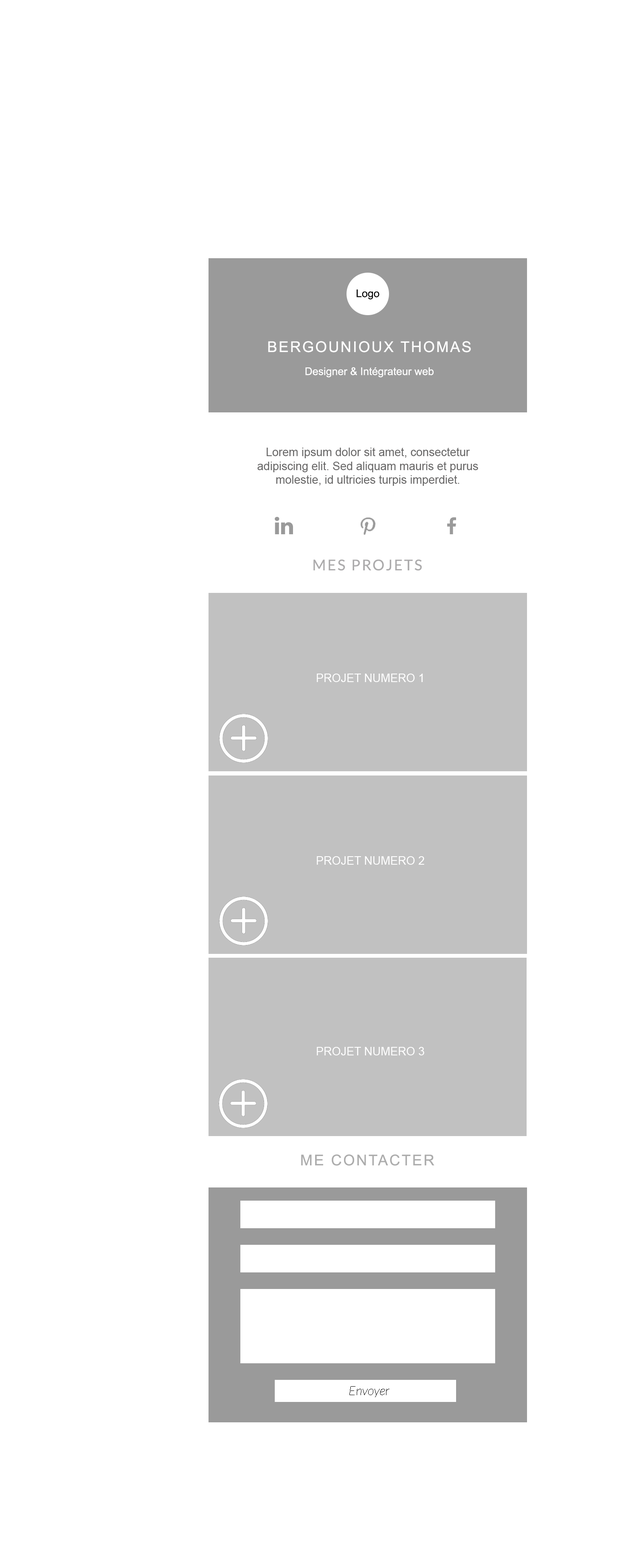
<style>
.page{position:relative;width:637px;height:1568px;background:#ffffff}
.page>*{position:absolute;margin:0}
.t1{font:10.6px "ArialMT";color:#000000}
.t2{font:14.9px "ArialMT";letter-spacing:0.1em;color:#ffffff}
.t3{font:10.6px "ArialMT";color:#ffffff}
.t4{font:11.5px "ArialMT";color:#686767}
.t5{font:14.9px "Lato-Regular";letter-spacing:0.1em;color:#acabac}
.t6{font:11.5px "ArialMT";color:#ffffff}
.t7{font:14.9px "ArialMT";letter-spacing:0.1em;color:#acabac}
.t8{font:12.7px "Lato-HairlineItalic";color:#000000}
</style>
<div class="page">
<p class="t1" style="left:356px;top:289px;width:23px;height:10px">Logo</p>
<p class="t2" style="left:268px;top:341px;width:203px;height:12px">BERGOUNIOUX THOMAS</p>
<p class="t3" style="left:305px;top:367px;width:129px;height:11px">Designer &amp; Intégrateur web</p>
<p class="t4" style="left:257px;top:448px;width:221px;height:38px;text-align:center">Lorem ipsum dolor sit amet, consectetur adipiscing elit. Sed aliquam mauris et purus molestie, id ultricies turpis imperdiet.</p>
<p class="t5" style="left:313px;top:559px;width:109px;height:12px">MES PROJETS</p>
<p class="t6" style="left:317px;top:674px;width:106px;height:8px">PROJET NUMERO 1</p>
<p class="t6" style="left:317px;top:856px;width:107px;height:9px">PROJET NUMERO 2</p>
<p class="t6" style="left:317px;top:1047px;width:107px;height:8px">PROJET NUMERO 3</p>
<p class="t7" style="left:301px;top:1154px;width:133px;height:12px">ME CONTACTER</p>
<p class="t8" style="left:350px;top:1386px;width:39px;height:11px">Envoyer</p>
</div>
